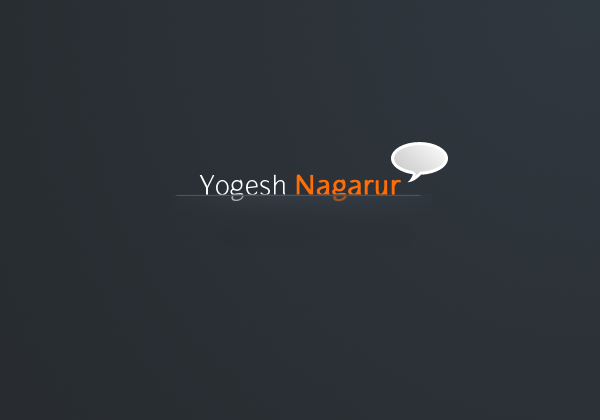
<style>
.page{position:relative;width:600px;height:420px}
.page>*{position:absolute;margin:0}
.t1{font:30px "GauntletClassic";color:#ff6d06;font-weight:bold}
.t2{font:30px "GauntletThin";color:#fefefe}
</style>
<div class="page">
<p class="t1" style="left:199px;top:174px;width:202px;height:28px"><span class="t2">Yogesh </span>Nagarur</p>
</div>
